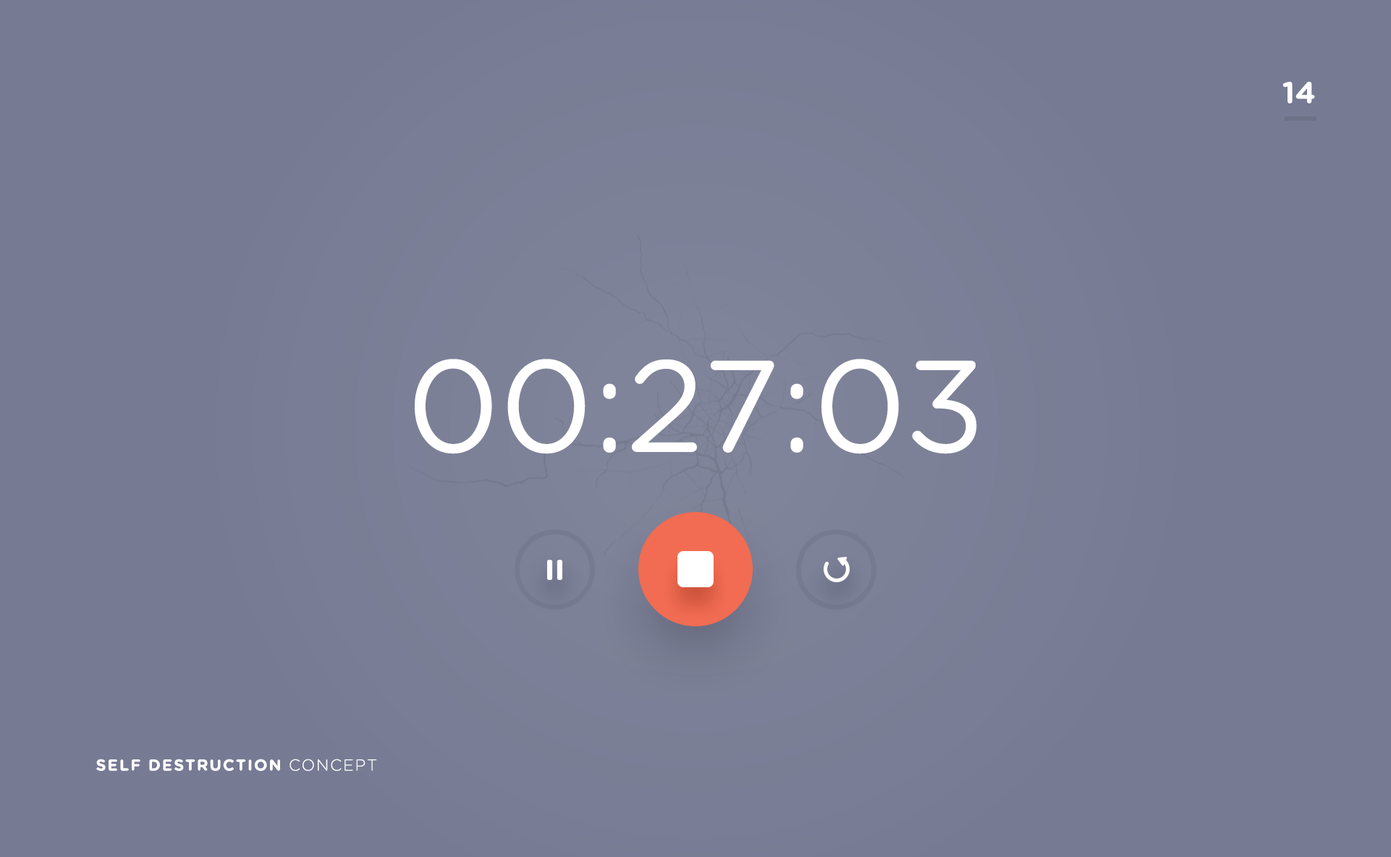
<style>
.page{position:relative;width:1391px;height:857px;background:#767a93}
.page>*{position:absolute;margin:0}
.t1{font:30.4px "GothamRounded-Bold";color:#ffffff}
.t2{font:130.2px "GothamRounded-Book";color:#ffffff}
.t3{font:15.9px "GothamRounded-Bold";letter-spacing:0.08em;color:#ffffff}
.t4{font:15.9px "GothamRounded-Light";letter-spacing:0.08em;color:#ffffff}
</style>
<div class="page">
<p class="t1" style="left:1282px;top:82px;width:33px;height:21px">14</p>
<p class="t2" style="left:415px;top:359px;width:562px;height:95px">00:27:03</p>
<p class="t3" style="left:96px;top:759px;width:281px;height:12px">SELF DESTRUCTION<span class="t4"> CONCEPT</span></p>
</div>
